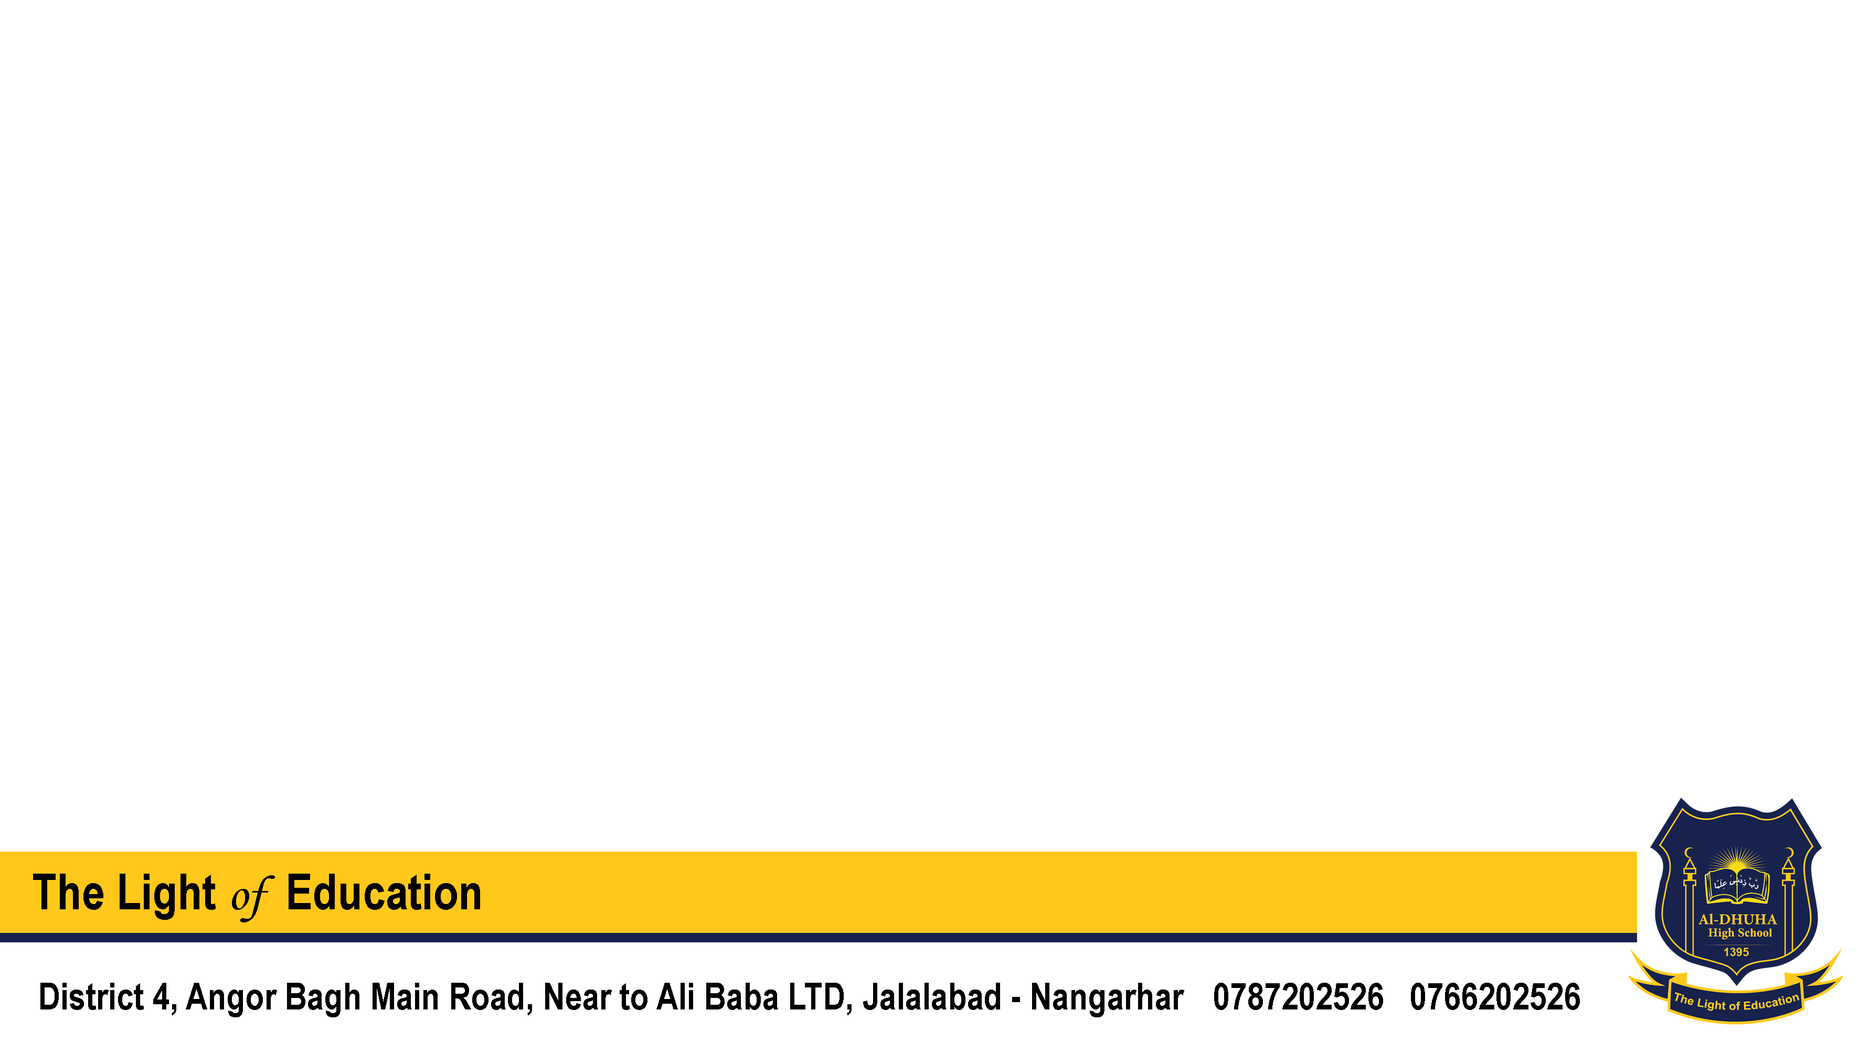
<style>
.page{position:relative;width:1859px;height:1053px;background:#ffffff}
.page>*{position:absolute;margin:0}
.t1{font:12px "ArialNarrow-Bold";color:#000000}
.t2{font:12px "MonotypeCorsiva";color:#000000}
.t3{font:9px "ArialNarrow-Bold";color:#000000}
</style>
<div class="page">
<p class="t1" style="left:33px;top:874px;width:447px;height:49px;text-align:center">The Light <span class="t2">of  </span>Education</p>
<p class="t3" style="left:40px;top:983px;width:1144px;height:35px;text-align:center">District 4, Angor Bagh Main Road, Near to Ali Baba LTD, Jalalabad - Nangarhar</p>
<p class="t3" style="left:1214px;top:983px;width:366px;height:27px;text-align:center">0766202526   0787202526</p>
</div>
